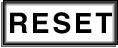
<style>
.page{position:relative;width:118px;height:48px;background:#ffffff}
.page>*{position:absolute;margin:0}
.t1{font:28px "Helvetica-Bold";letter-spacing:0.1em;color:#000000}
</style>
<div class="page">
<p class="t1" style="left:10px;top:12px;width:102px;height:22px">RESET</p>
</div>
